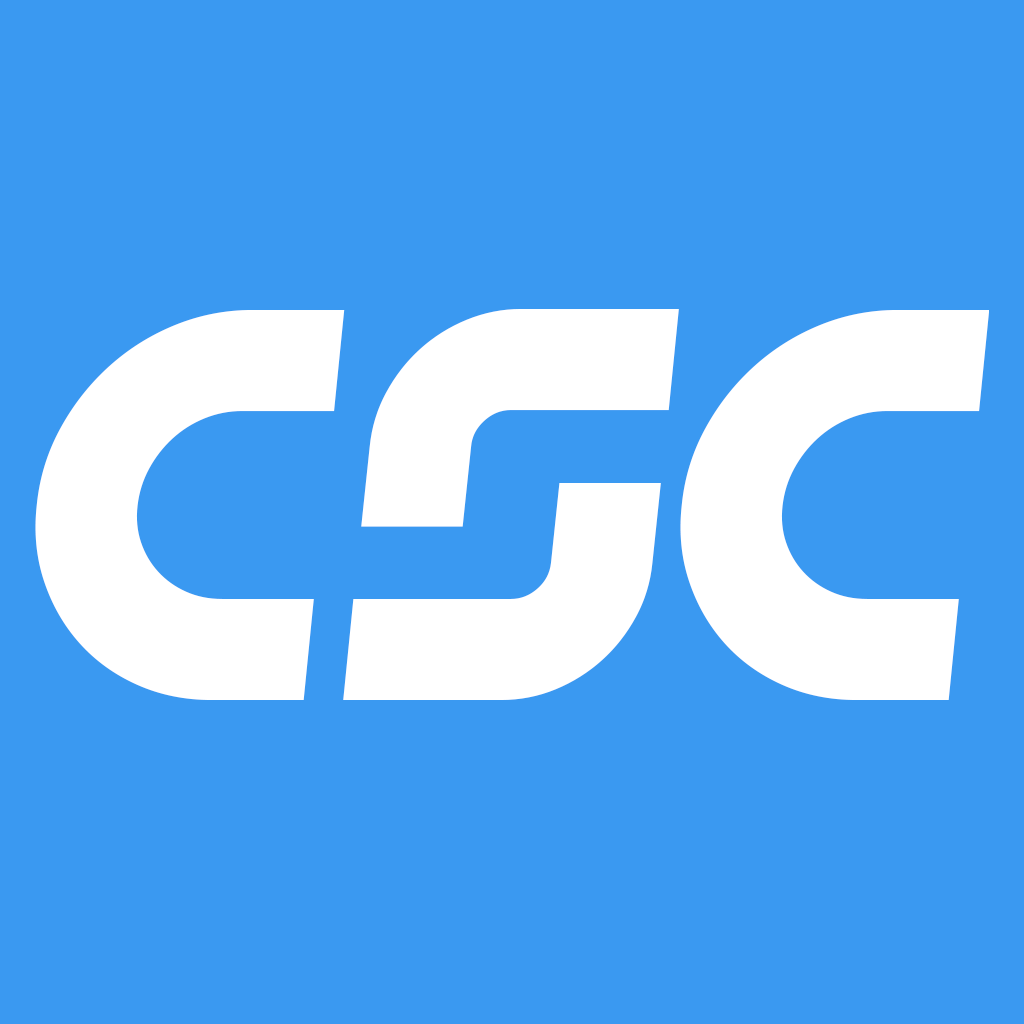
<style>
.page{position:relative;width:1024px;height:1024px;background:#3a99f1}
.page>*{position:absolute;margin:0}
.t1{font:562.5px "Olga-BlackItalic";color:#ffffff}
</style>
<div class="page">
<p class="t1" style="left:35px;top:309px;width:954px;height:391px">csc</p>
</div>
